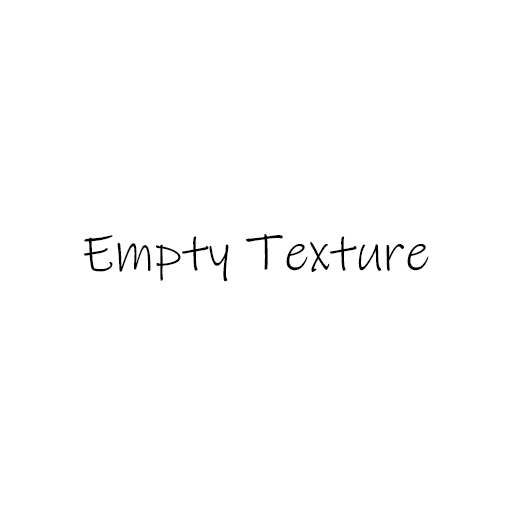
<style>
.page{position:relative;width:512px;height:512px;background:#ffffff}
.page>*{position:absolute;margin:0}
.t1{font:53.6px "InkFree";color:#000000}
</style>
<div class="page">
<p class="t1" style="left:84px;top:234px;width:345px;height:48px">Empty Texture</p>
</div>
